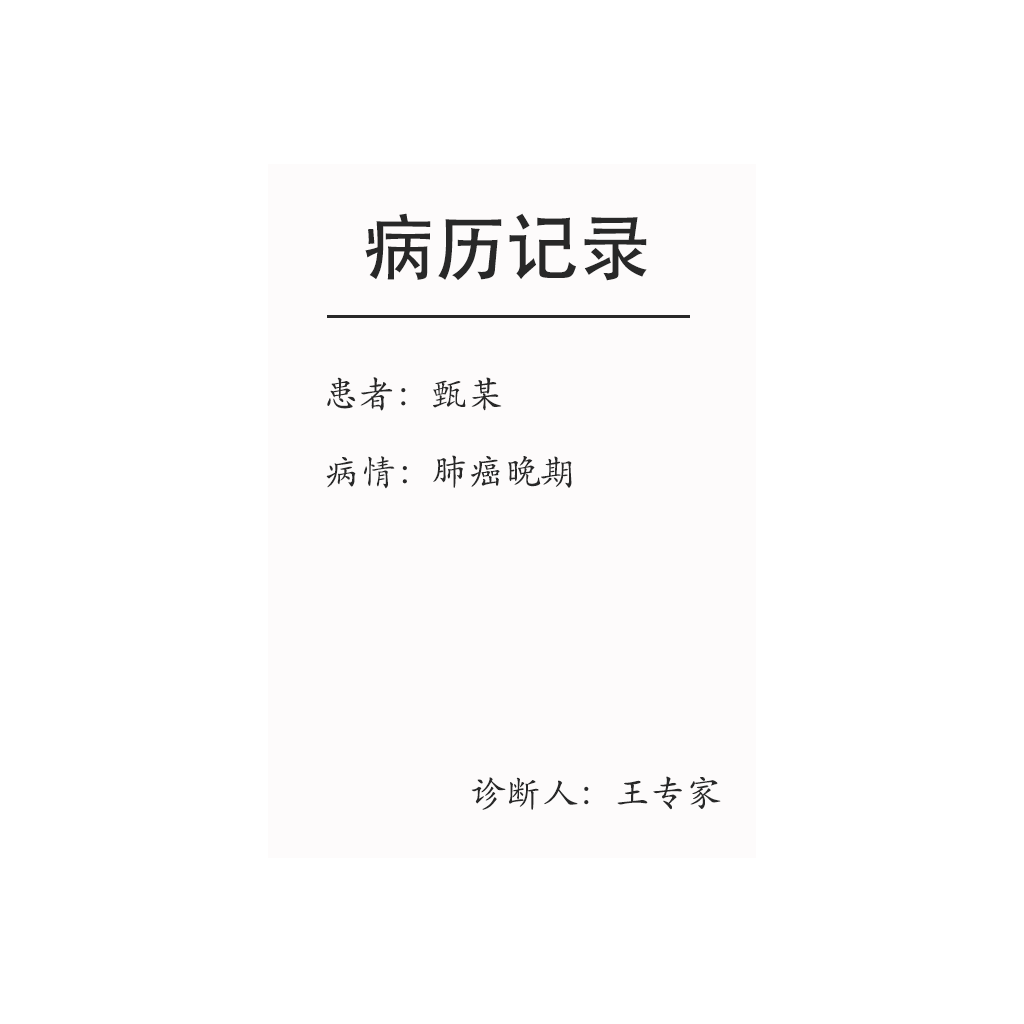
<style>
.page{position:relative;width:1024px;height:1024px;background:#ffffff}
.page>*{position:absolute;margin:0}
.t1{font:72px "AdobeHeitiStd-Regular";color:#282828}
.t2{font:36px "STKaiti";color:#282828}
</style>
<div class="page">
<p class="t1" style="left:365px;top:213px;width:282px;height:68px">病历记录</p>
<p class="t2" style="left:327px;top:377px;width:175px;height:34px">患者：甄某</p>
<p class="t2" style="left:326px;top:455px;width:246px;height:34px">病情：肺癌晚期</p>
<p class="t2" style="left:471px;top:776px;width:250px;height:34px">诊断人：王专家</p>
</div>
